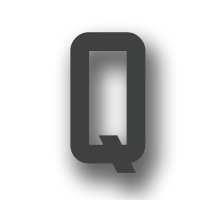
<style>
.page{position:relative;width:215px;height:200px;background:#ffffff}
.page>*{position:absolute;margin:0}
.t1{font:150px "Manteka";color:#3f4040}
</style>
<div class="page">
<p class="t1" style="left:70px;top:32px;width:76px;height:141px">q</p>
</div>
